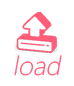
<style>
.page{position:relative;width:74px;height:86px;background:#ffffff}
.page>*{position:absolute;margin:0}
.t1{font:26.3px "SegoeUI-Light";color:#ff5e79;font-style:italic}
</style>
<div class="page">
<p class="t1" style="left:14px;top:55px;width:48px;height:21px">load</p>
</div>
